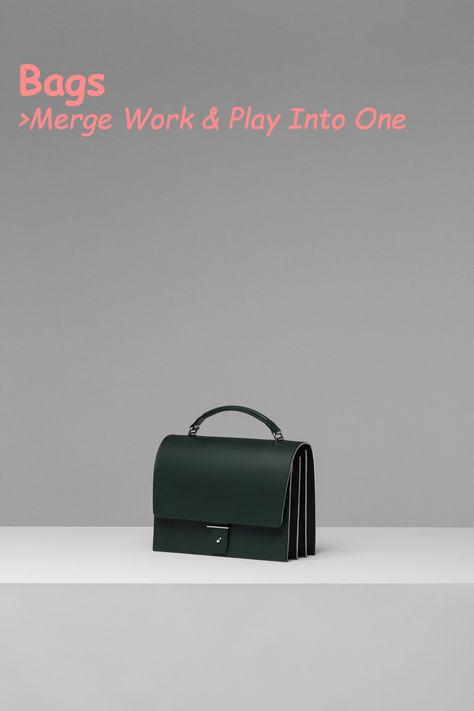
<style>
.page{position:relative;width:474px;height:711px}
.page>*{position:absolute;margin:0}
.t1{font:28px "ComicSansMS-Italic";color:#fd8c8c}
.t2{font:40px "ComicSansMS-Bold";color:#fd8c8c}
</style>
<div class="page">
<p class="t1" style="left:19px;top:64px;width:387px;height:73px"><span class="t2">Bags<br></span>&gt;Merge Work &amp; Play Into One</p>
</div>
